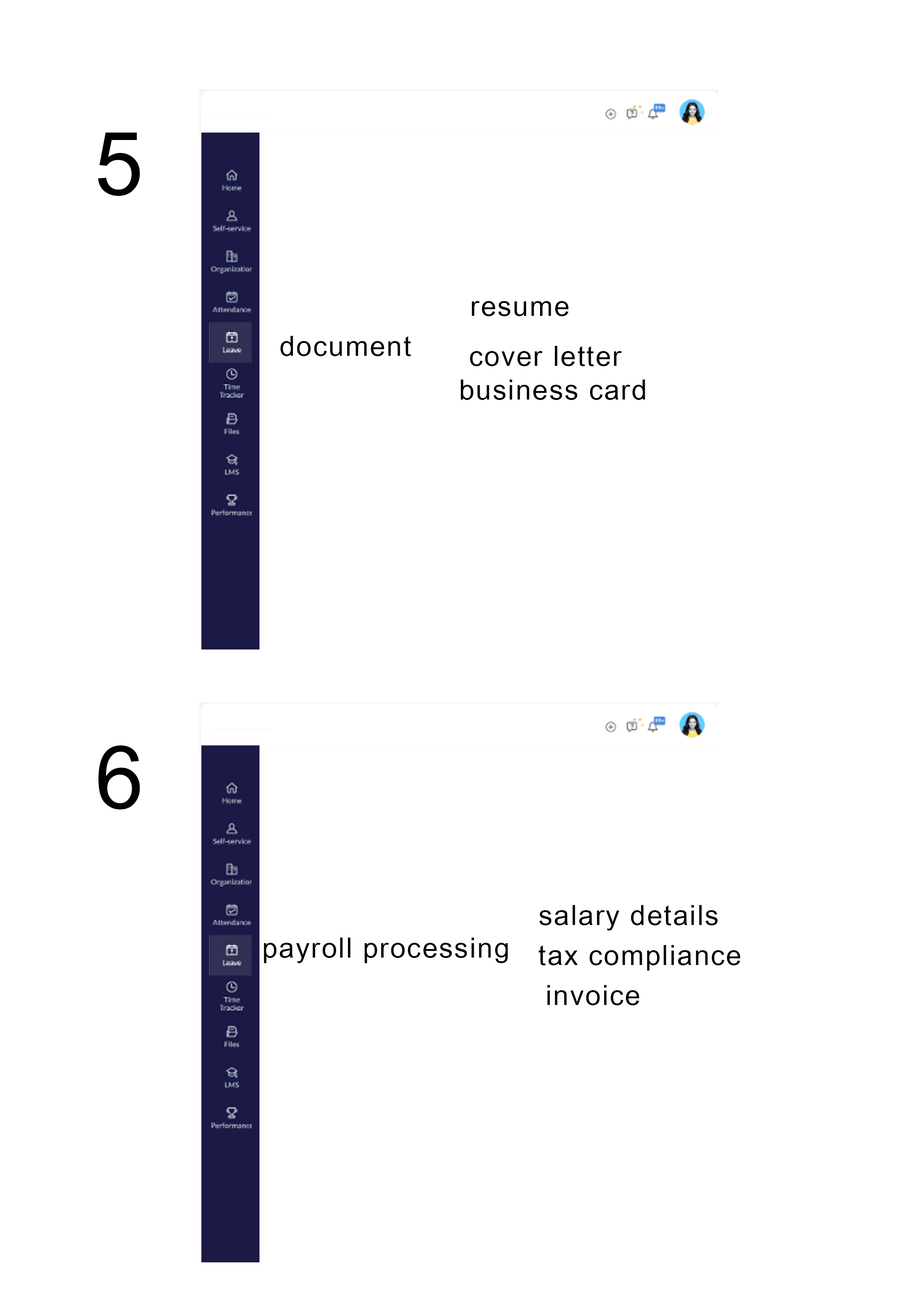
<style>
.page{position:relative;width:918px;height:1299px;background:#ffffff}
.page>*{position:absolute;margin:0}
.t1{font:88px "ArialUnicodeMS";letter-spacing:0.05em;color:#000000}
.t2{font:27.8px "ArialUnicodeMS";letter-spacing:0.05em;color:#000000}
.t3{font:87.6px "ArialUnicodeMS";letter-spacing:0.05em;color:#000000}
</style>
<div class="page">
<p class="t1" style="left:98px;top:133px;width:42px;height:63px">5</p>
<p class="t2" style="left:472px;top:301px;width:97px;height:15px">resume</p>
<p class="t2" style="left:280px;top:336px;width:131px;height:20px">document</p>
<p class="t2" style="left:470px;top:346px;width:152px;height:20px">cover letter</p>
<p class="t2" style="left:461px;top:379px;width:184px;height:21px">business card</p>
<p class="t3" style="left:98px;top:745px;width:42px;height:64px">6</p>
<p class="t2" style="left:539px;top:905px;width:179px;height:25px">salary details</p>
<p class="t2" style="left:264px;top:937px;width:244px;height:26px">payroll processing</p>
<p class="t2" style="left:539px;top:945px;width:201px;height:25px">tax compliance</p>
<p class="t2" style="left:548px;top:985px;width:91px;height:20px">invoice</p>
</div>
